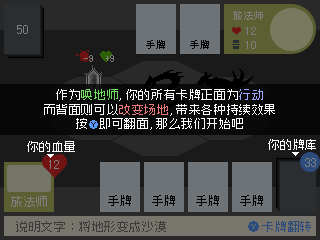
<style>
.page{position:relative;width:320px;height:240px;background:#1a1a1a}
.page>*{position:absolute;margin:0}
.t1{font:10px "ZpixEX2";letter-spacing:0.05em;color:#7f7f7f}
.t2{font:13.3px "ZpixEX2";letter-spacing:0.05em;color:#7f7f7f}
.t3{font:10.7px "ZpixEX2";letter-spacing:0.05em;color:#7f7f7f}
.t4{font:10px "ZpixEX2";letter-spacing:0.05em;color:#000000}
.t5{font:12px "ZpixEX2";letter-spacing:0.05em;color:#ffffff}
.t6{font:12px "ZpixEX2";letter-spacing:0.05em;color:#72e160}
.t7{font:12px "ZpixEX2";letter-spacing:0.05em;color:#9fa8ff}
.t8{font:12px "ZpixEX2";letter-spacing:0.05em;color:#eb7979}
.t9{font:12px "ZpixEX2";letter-spacing:0.05em;color:#7f7f7f}
.t10{font:12px "ZpixEX2";letter-spacing:0.05em;color:#000000}
.t11{font:12px "ZpixEX2";letter-spacing:0.05em;color:#3b3b3b}
.t12{font:12px "ZpixEX2";letter-spacing:0.05em;color:#2b4c7d}
</style>
<div class="page">
<p class="t1" style="left:233px;top:11px;width:30px;height:9px">旅法师</p>
<p class="t2" style="left:17px;top:25px;width:11px;height:9px">50</p>
<p class="t3" style="left:246px;top:27px;width:10px;height:8px">12</p>
<p class="t4" style="left:146px;top:40px;width:19px;height:9px">手牌</p>
<p class="t4" style="left:190px;top:40px;width:19px;height:9px">手牌</p>
<p class="t3" style="left:246px;top:41px;width:10px;height:8px">10</p>
<p class="t1" style="left:84px;top:55px;width:9px;height:7px">-9</p>
<p class="t1" style="left:106px;top:55px;width:8px;height:7px">+9</p>
<p class="t5" style="left:44px;top:89px;width:231px;height:41px;text-align:center">作为<span class="t6">唤地师</span>,你的所有卡牌正面为<span class="t7">行动</span><br>而背面则可以<span class="t8">改变场地</span>,带来各种持续效果<br>按    即可翻面,那么我们开始吧</p>
<p class="t5" style="left:27px;top:141px;width:48px;height:11px">你的血量</p>
<p class="t5" style="left:268px;top:139px;width:48px;height:11px">你的牌库</p>
<p class="t9" style="left:49px;top:160px;width:10px;height:9px">12</p>
<p class="t9" style="left:305px;top:158px;width:11px;height:9px">33</p>
<p class="t9" style="left:11px;top:196px;width:36px;height:11px">旅法师</p>
<p class="t10" style="left:108px;top:195px;width:23px;height:11px">手牌</p>
<p class="t10" style="left:152px;top:195px;width:23px;height:11px">手牌</p>
<p class="t10" style="left:196px;top:195px;width:23px;height:11px">手牌</p>
<p class="t10" style="left:240px;top:195px;width:23px;height:11px">手牌</p>
<p class="t11" style="left:16px;top:221px;width:150px;height:11px">说明文字：将地形变成沙漠</p>
<p class="t12" style="left:262px;top:221px;width:49px;height:11px">卡牌翻转</p>
</div>
